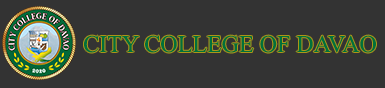
<style>
.page{position:relative;width:385px;height:88px;background:#333333}
.page>*{position:absolute;margin:0}
.t1{font:24px "TimesNewRomanPSMT";color:#00713b}
</style>
<div class="page">
<p class="t1" style="left:84px;top:35px;width:292px;height:18px">CITY COLLEGE OF DAVAO</p>
</div>
